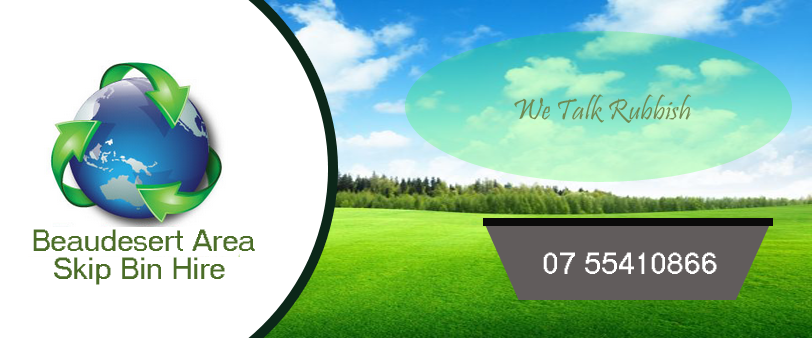
<style>
.page{position:relative;width:812px;height:338px;background:#ffffff}
.page>*{position:absolute;margin:0}
.t1{font:30px "Pristina-Regular";color:#6f8a53}
.t2{font:30px "MS Sans Serif";color:#4b6d28}
.t3{font:30px "MS Sans Serif";color:#ffffff}
</style>
<div class="page">
<p class="t1" style="left:514px;top:94px;width:177px;height:29px">We Talk Rubbish</p>
<p class="t2" style="left:33px;top:229px;width:222px;height:22px">Beaudesert Area</p>
<p class="t2" style="left:54px;top:257px;width:171px;height:28px">Skip Bin Hire</p>
<p class="t3" style="left:543px;top:252px;width:174px;height:22px">07 55410866</p>
</div>
